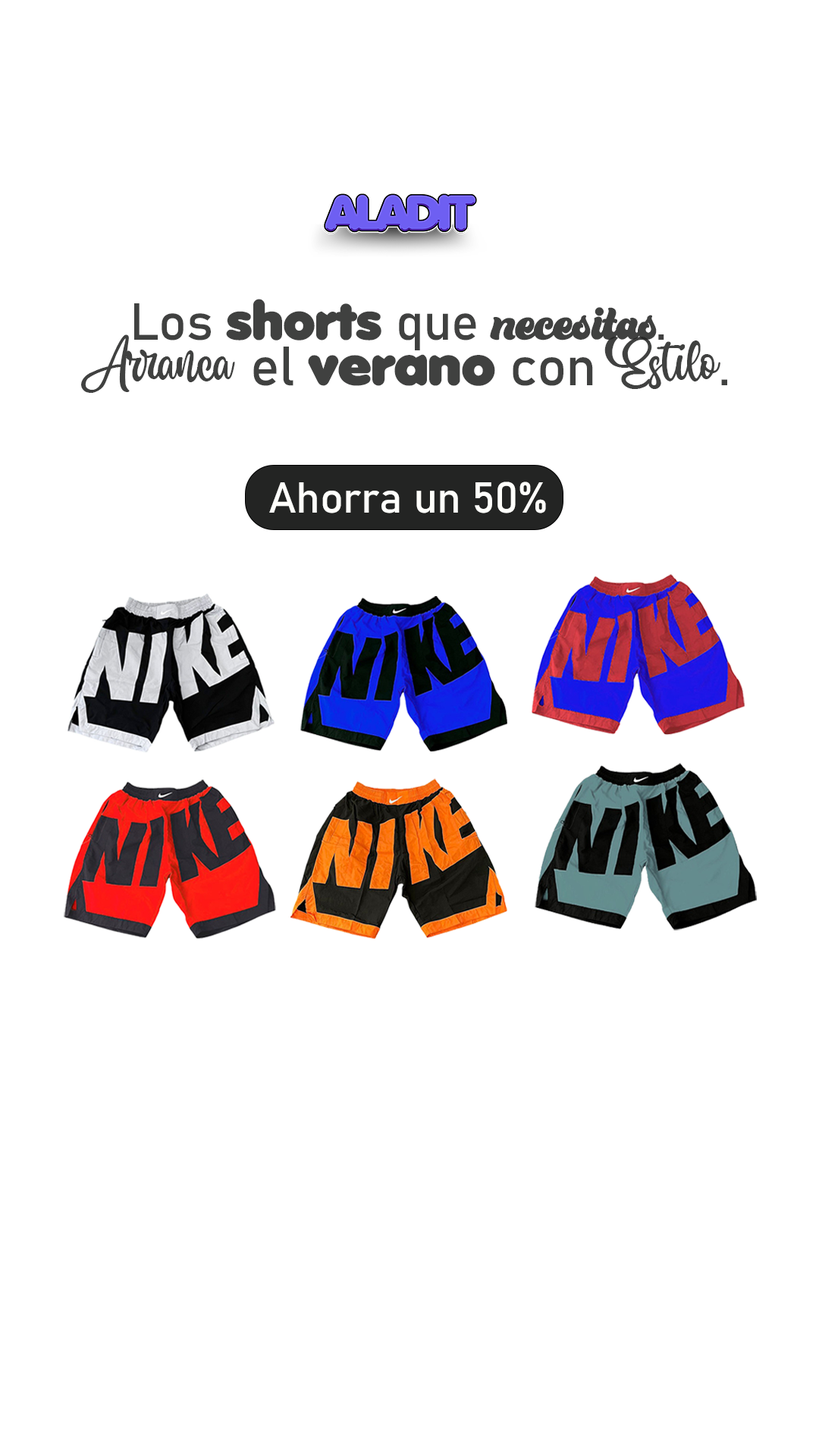
<style>
.page{position:relative;width:819px;height:1456px;background:#ffffff}
.page>*{position:absolute;margin:0}
.t1{font:51.1px "BratsyScriptDemo-Reguler";letter-spacing:-0.01em;color:#404140}
.t2{font:51.1px "Bahnschrift";letter-spacing:-0.01em;color:#404140}
.t3{font:51.1px "Anja-Eliane-Nornal";letter-spacing:-0.01em;color:#404140}
.t4{font:72.6px "BlantickScript";letter-spacing:-0.01em;color:#404140}
.t5{font:54.5px "Bahnschrift";letter-spacing:-0.01em;color:#404140}
.t6{font:54.5px "Anja-Eliane-Nornal";letter-spacing:-0.01em;color:#404140}
.t7{font:42.9px "Bahnschrift";letter-spacing:-0.01em;color:#fffffb}
</style>
<div class="page">
<p class="t1" style="left:134px;top:299px;width:530px;height:51px"><span class="t2">Los </span><span class="t3">shorts </span><span class="t2">que </span>necesitas<span class="t2">.</span></p>
<p class="t4" style="left:81px;top:334px;width:646px;height:59px">Arranca <span class="t5">el </span><span class="t6">verano</span><span class="t5"> con </span>Estilo<span class="t5">.</span></p>
<p class="t7" style="left:269px;top:482px;width:277px;height:31px">Ahorra un 50%</p>
</div>
